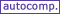
<style>
.page{position:relative;width:60px;height:14px;background:#ffffff}
.page>*{position:absolute;margin:0}
.t1{font:10px "Verdana";color:#553da1;font-weight:bold}
</style>
<div class="page">
<p class="t1" style="left:3px;top:2px;width:55px;height:10px">autocomp.</p>
</div>
